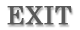
<style>
.page{position:relative;width:80px;height:30px;background:#ffffff}
.page>*{position:absolute;margin:0}
.t1{font:25px "Century";letter-spacing:0.01em;color:#595959;font-weight:bold}
</style>
<div class="page">
<p class="t1" style="left:7px;top:6px;width:65px;height:19px">EXIT</p>
</div>
